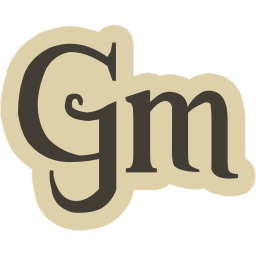
<style>
.page{position:relative;width:256px;height:256px;background:#ffffff}
.page>*{position:absolute;margin:0}
.t1{font:190.2px "Versal-Gothic";color:#433e35;text-transform:uppercase;font-weight:bold}
.t2{font:135px "Versal-Gothic";color:#433e35;text-transform:uppercase;font-weight:bold}
</style>
<div class="page">
<p class="t1" style="left:18px;top:42px;width:99px;height:171px">G</p>
<p class="t2" style="left:125px;top:90px;width:113px;height:89px">m</p>
</div>
